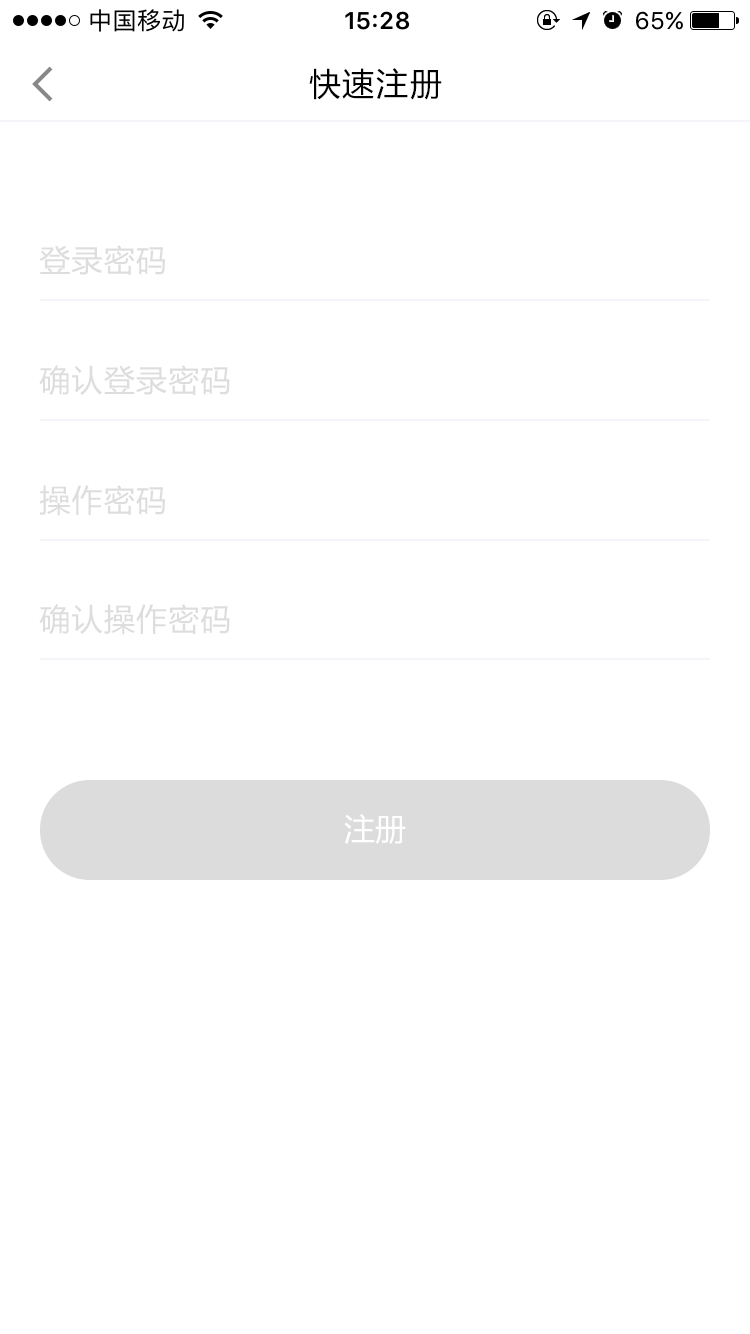
<style>
.page{position:relative;width:750px;height:1334px;background:#ffffff}
.page>*{position:absolute;margin:0}
.t1{font:32px "MicrosoftYaHei";letter-spacing:0.05em;color:#000000}
.t2{font:30.7px "MicrosoftYaHei";letter-spacing:0.05em;color:#dddddd}
.t3{font:30.7px "MicrosoftYaHei";color:#ffffff}
</style>
<div class="page">
<p class="t1" style="left:309px;top:68px;width:133px;height:32px">快速注册</p>
<p class="t2" style="left:39px;top:245px;width:126px;height:30px">登录密码</p>
<p class="t2" style="left:39px;top:365px;width:191px;height:30px">确认登录密码</p>
<p class="t2" style="left:39px;top:485px;width:126px;height:31px">操作密码</p>
<p class="t2" style="left:39px;top:604px;width:191px;height:31px">确认操作密码</p>
<p class="t3" style="left:344px;top:814px;width:62px;height:30px">注册</p>
</div>
